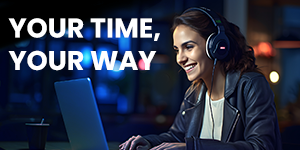
<style>
.page{position:relative;width:300px;height:150px}
.page>*{position:absolute;margin:0}
.t1{font:27px "Poppins-Bold";color:#ffffff;text-transform:uppercase}
</style>
<div class="page">
<p class="t1" style="left:8px;top:18px;width:152px;height:53px">Your Time,<br>Your Way</p>
</div>
